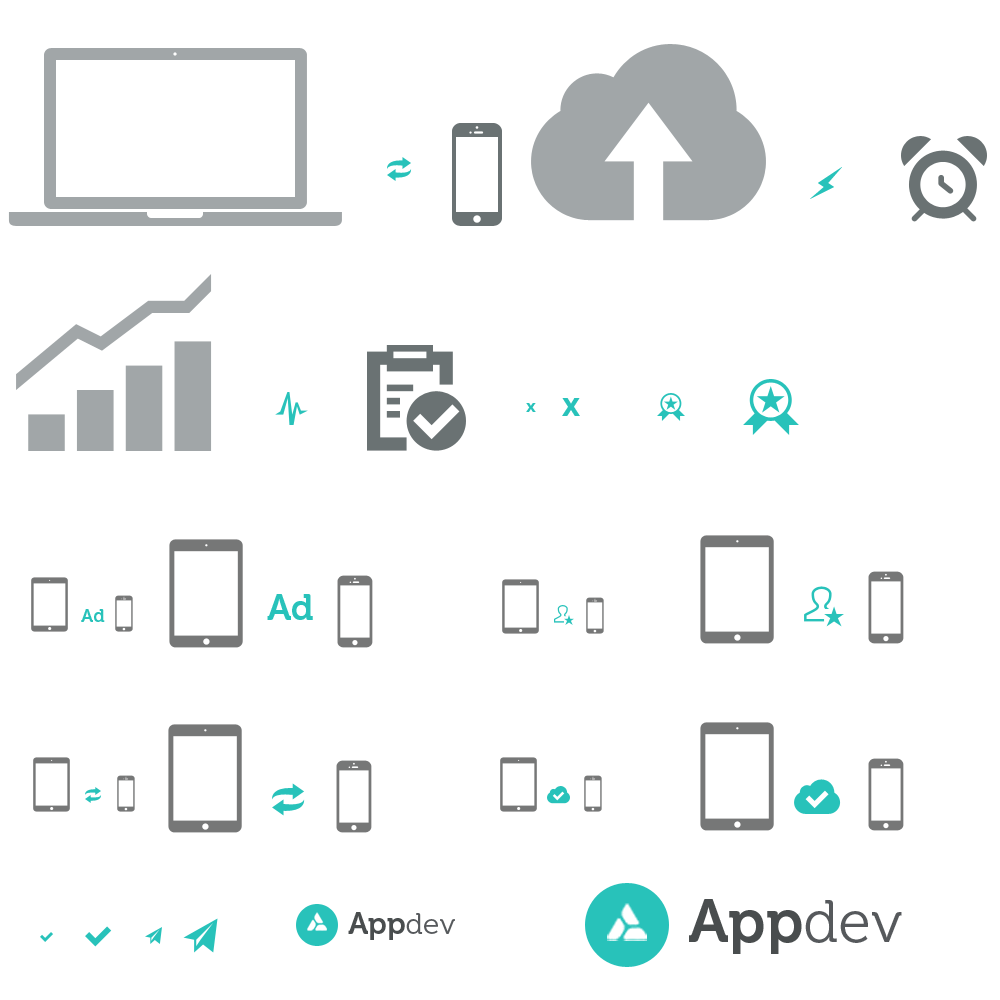
<style>
.page{position:relative;width:1000px;height:1000px;background:#ffffff}
.page>*{position:absolute;margin:0}
.t1{font:60px "Museo-700";color:#494d4e}
.t2{font:60px "Museo-300";color:#56595c}
.t3{font:30px "Museo-700";color:#494d4e}
.t4{font:30px "Museo-300";color:#56595c}
</style>
<div class="page">
<p class="t1" style="left:689px;top:899px;width:213px;height:55px">App<span class="t2">dev</span></p>
<p class="t3" style="left:348px;top:912px;width:107px;height:28px">App<span class="t4">dev</span></p>
</div>
